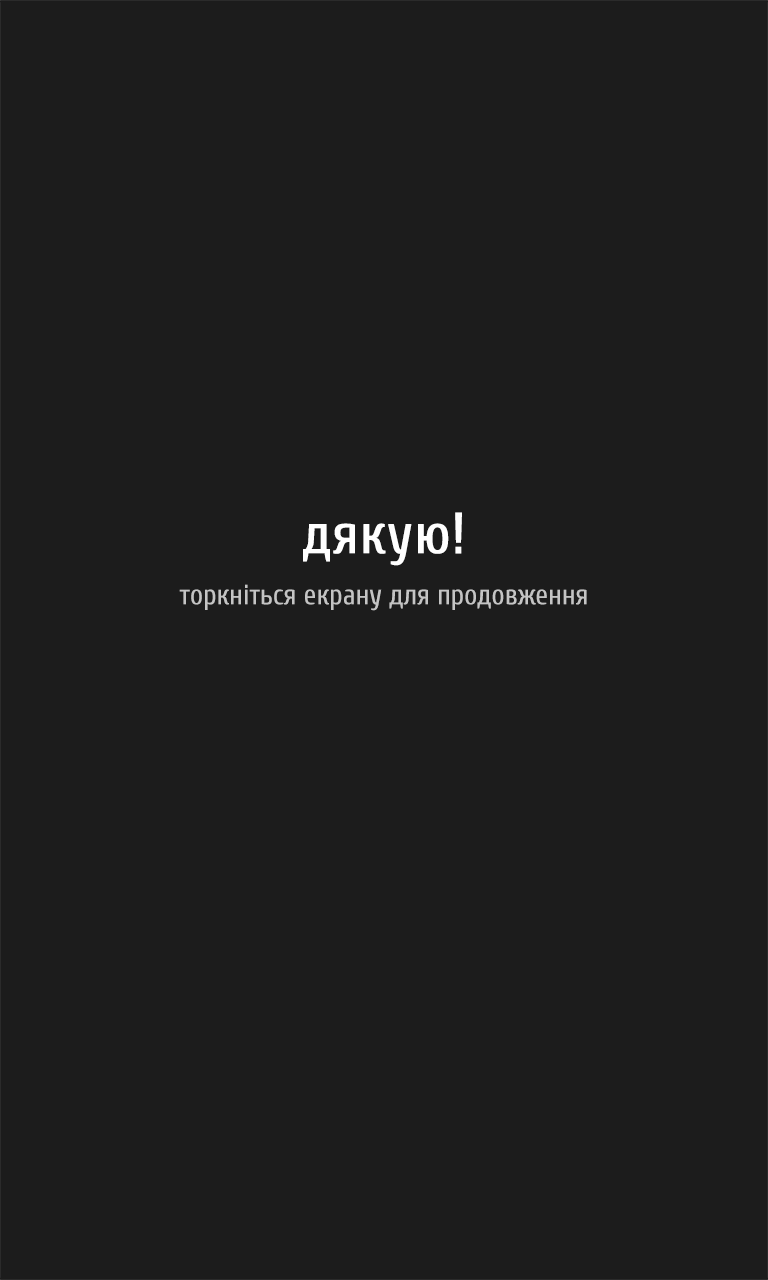
<style>
.page{position:relative;width:768px;height:1280px;background:#1c1c1c}
.page>*{position:absolute;margin:0}
.t1{font:57.6px "Cuprum-Regular";color:#ffffff;font-weight:bold}
.t2{font:28.8px "Cuprum-Regular";color:#c4c4c4}
</style>
<div class="page">
<p class="t1" style="left:303px;top:512px;width:159px;height:54px">дякую!</p>
<p class="t2" style="left:179px;top:584px;width:408px;height:27px">торкніться екрану для продовження</p>
</div>
